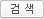
<style>
.page{position:relative;width:44px;height:19px}
.page>*{position:absolute;margin:0}
.t1{font:12px "morris9";color:#4f4f4f}
</style>
<div class="page">
<p class="t1" style="left:11px;top:4px;width:22px;height:10px">검 색</p>
</div>
